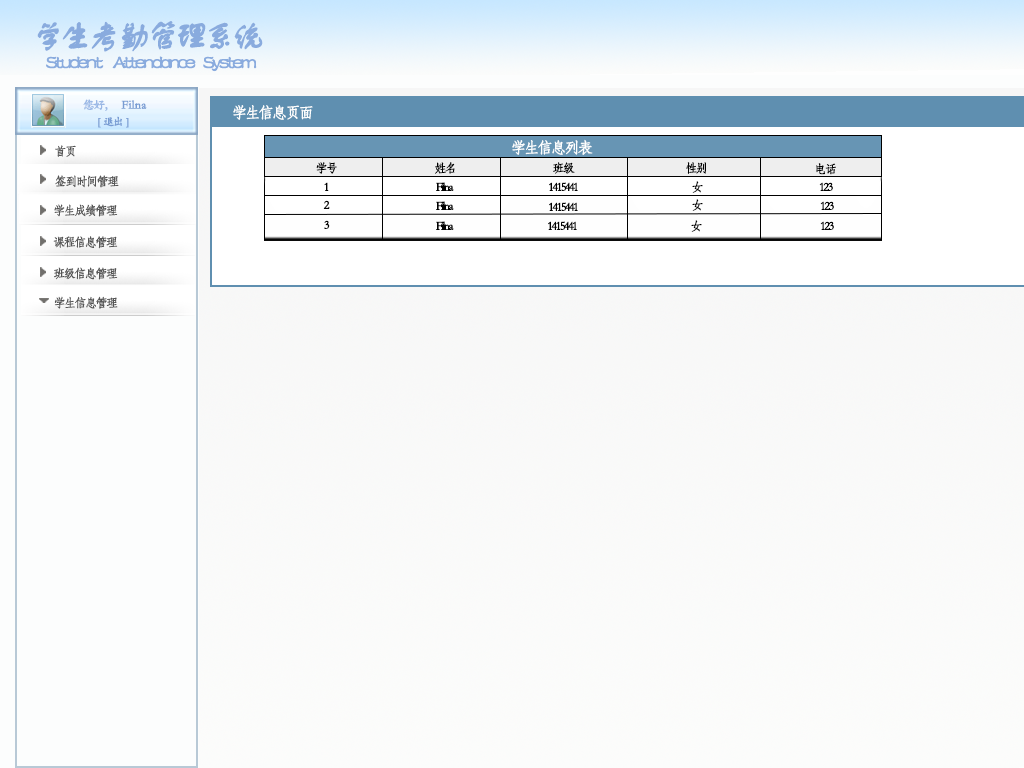
<style>
.page{position:relative;width:1024px;height:768px}
.page>*{position:absolute;margin:0}
.t1{font:32.7px "FZSTK--GBK1-0";letter-spacing:-0.15em;color:#89abde;font-weight:bold}
.t2{font:19.6px "FZSTK--GBK1-0";letter-spacing:-0.15em;color:#89abde;font-weight:bold}
.t3{font:12px "STKaiti";letter-spacing:-0.15em;color:#99b7e5;font-weight:bold}
.t4{font:12px "STKaiti";color:#789cd3;font-weight:bold}
.t5{font:15.3px "STFangsong";letter-spacing:-0.15em;color:#fdfefe;font-weight:bold}
.t6{font:10.9px "STKaiti";letter-spacing:-0.15em;color:#789cd3;font-weight:bold}
.t7{font:12px "STFangsong";letter-spacing:-0.15em;color:#555555;font-weight:bold}
.t8{font:12px "STFangsong";letter-spacing:-0.15em;color:#020202;font-weight:bold}
</style>
<div class="page">
<p class="t1" style="left:37px;top:21px;width:226px;height:31px">学生考勤管理系统</p>
<p class="t2" style="left:46px;top:56px;width:211px;height:16px">Student     Attendance    System</p>
<p class="t3" style="left:83px;top:99px;width:25px;height:12px">您好，</p>
<p class="t4" style="left:121px;top:100px;width:26px;height:9px">Filna</p>
<p class="t5" style="left:233px;top:105px;width:80px;height:15px">学生信息页面</p>
<p class="t6" style="left:98px;top:116px;width:31px;height:12px">[   退出   ]</p>
<p class="t7" style="left:55px;top:145px;width:21px;height:12px">首页</p>
<p class="t5" style="left:512px;top:139px;width:81px;height:16px">学生信息列表</p>
<p class="t8" style="left:316px;top:162px;width:21px;height:12px">学号</p>
<p class="t8" style="left:435px;top:162px;width:20px;height:12px">姓名</p>
<p class="t8" style="left:553px;top:162px;width:22px;height:12px">班级</p>
<p class="t8" style="left:686px;top:162px;width:20px;height:12px">性别</p>
<p class="t8" style="left:816px;top:163px;width:20px;height:12px">电话</p>
<p class="t7" style="left:55px;top:175px;width:64px;height:13px">签到时间管理</p>
<p class="t8" style="left:324px;top:182px;width:5px;height:9px">1</p>
<p class="t8" style="left:436px;top:182px;width:18px;height:9px">Filna</p>
<p class="t8" style="left:549px;top:182px;width:29px;height:9px">1415441</p>
<p class="t8" style="left:692px;top:181px;width:11px;height:12px">女</p>
<p class="t8" style="left:819px;top:182px;width:14px;height:9px">123</p>
<p class="t7" style="left:54px;top:204px;width:64px;height:13px">学生成绩管理</p>
<p class="t8" style="left:323px;top:200px;width:7px;height:9px">2</p>
<p class="t8" style="left:436px;top:201px;width:18px;height:9px">Filna</p>
<p class="t8" style="left:549px;top:202px;width:29px;height:9px">1415441</p>
<p class="t8" style="left:692px;top:199px;width:11px;height:12px">女</p>
<p class="t8" style="left:820px;top:201px;width:14px;height:9px">123</p>
<p class="t8" style="left:324px;top:220px;width:6px;height:9px">3</p>
<p class="t8" style="left:436px;top:221px;width:18px;height:9px">Filna</p>
<p class="t8" style="left:548px;top:221px;width:29px;height:9px">1415441</p>
<p class="t8" style="left:691px;top:220px;width:11px;height:12px">女</p>
<p class="t8" style="left:820px;top:221px;width:14px;height:9px">123</p>
<p class="t7" style="left:53px;top:236px;width:65px;height:13px">课程信息管理</p>
<p class="t7" style="left:54px;top:267px;width:64px;height:13px">班级信息管理</p>
<p class="t7" style="left:54px;top:296px;width:64px;height:13px">学生信息管理</p>
</div>
